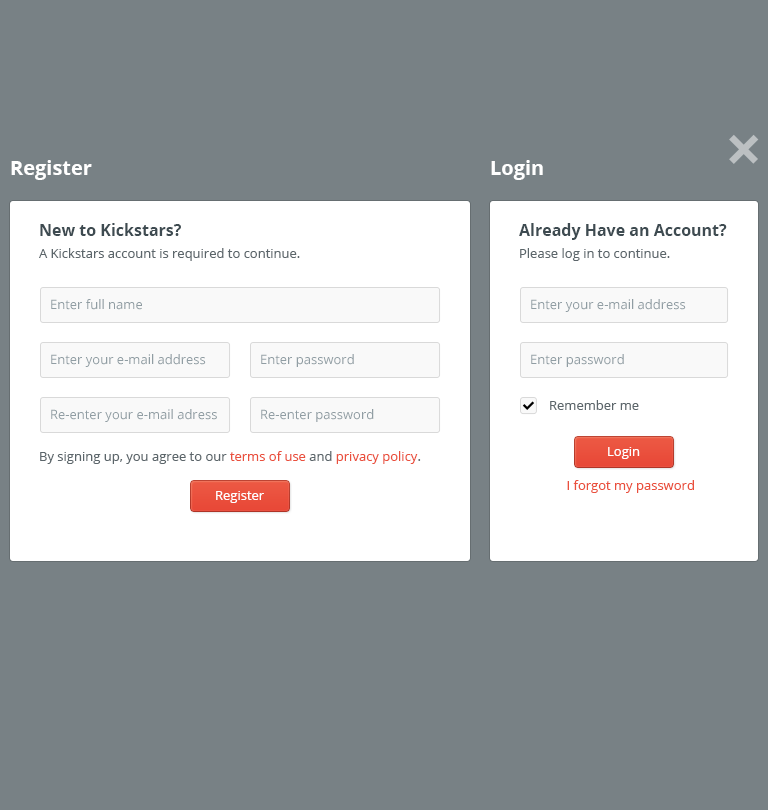
<style>
.page{position:relative;width:768px;height:810px;background:#788185}
.page>*{position:absolute;margin:0}
.t1{font:20px "OpenSans-Bold";color:#ffffff}
.t2{font:16px "OpenSans-Bold";color:#3e4b51}
.t3{font:13px "OpenSans";color:#5c666b}
.t4{font:13px "OpenSans";color:#909da3}
.t5{font:13px "OpenSans";color:#ffffff}
.t6{font:13px "OpenSans";color:#ea503d}
</style>
<div class="page">
<p class="t1" style="left:11px;top:160px;width:81px;height:20px">Register</p>
<p class="t1" style="left:491px;top:160px;width:52px;height:20px">Login</p>
<p class="t2" style="left:40px;top:223px;width:141px;height:13px">New to Kickstars?</p>
<p class="t2" style="left:519px;top:223px;width:208px;height:17px">Already Have an Account?</p>
<p class="t3" style="left:39px;top:248px;width:261px;height:13px">A Kickstars account is required to continue.</p>
<p class="t3" style="left:520px;top:248px;width:150px;height:13px">Please log in to continue.</p>
<p class="t4" style="left:51px;top:299px;width:91px;height:11px">Enter full name</p>
<p class="t4" style="left:531px;top:299px;width:155px;height:13px">Enter your e-mail address</p>
<p class="t4" style="left:51px;top:354px;width:155px;height:13px">Enter your e-mail address</p>
<p class="t4" style="left:261px;top:354px;width:93px;height:13px">Enter password</p>
<p class="t4" style="left:531px;top:354px;width:93px;height:13px">Enter password</p>
<p class="t3" style="left:550px;top:400px;width:89px;height:10px">Remember me</p>
<p class="t4" style="left:51px;top:409px;width:166px;height:13px">Re-enter your e-mail adress</p>
<p class="t4" style="left:261px;top:409px;width:113px;height:13px">Re-enter password</p>
<p class="t5" style="left:608px;top:447px;width:32px;height:12px">Login</p>
<p class="t3" style="left:40px;top:451px;width:381px;height:13px">By signing up, you agree to our <span class="t6">terms of use</span> and<span class="t6"> privacy policy</span>.</p>
<p class="t6" style="left:567px;top:480px;width:127px;height:13px">I forgot my password</p>
<p class="t5" style="left:216px;top:491px;width:48px;height:12px">Register</p>
</div>
